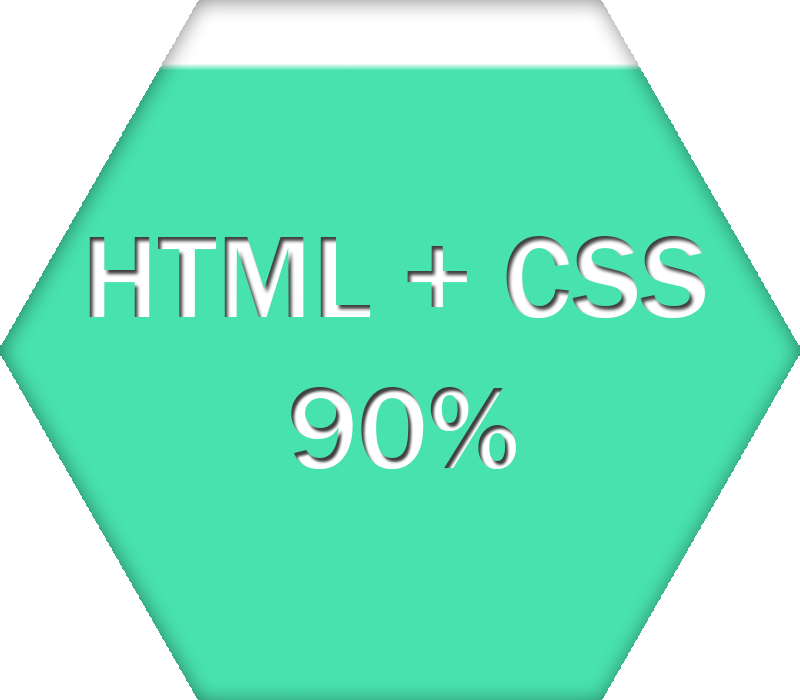
<style>
.page{position:relative;width:800px;height:700px;background:#ffffff}
.page>*{position:absolute;margin:0}
.t1{font:120px "FranklinGothic-Medium";color:#ffffff}
.t2{font:120px "FranklinGothic-Medium"}
</style>
<div class="page">
<p class="t1" style="left:89px;top:236px;width:616px;height:82px">HTML + CSS</p>
<p class="t2" style="left:291px;top:387px;width:225px;height:82px">90%</p>
</div>
